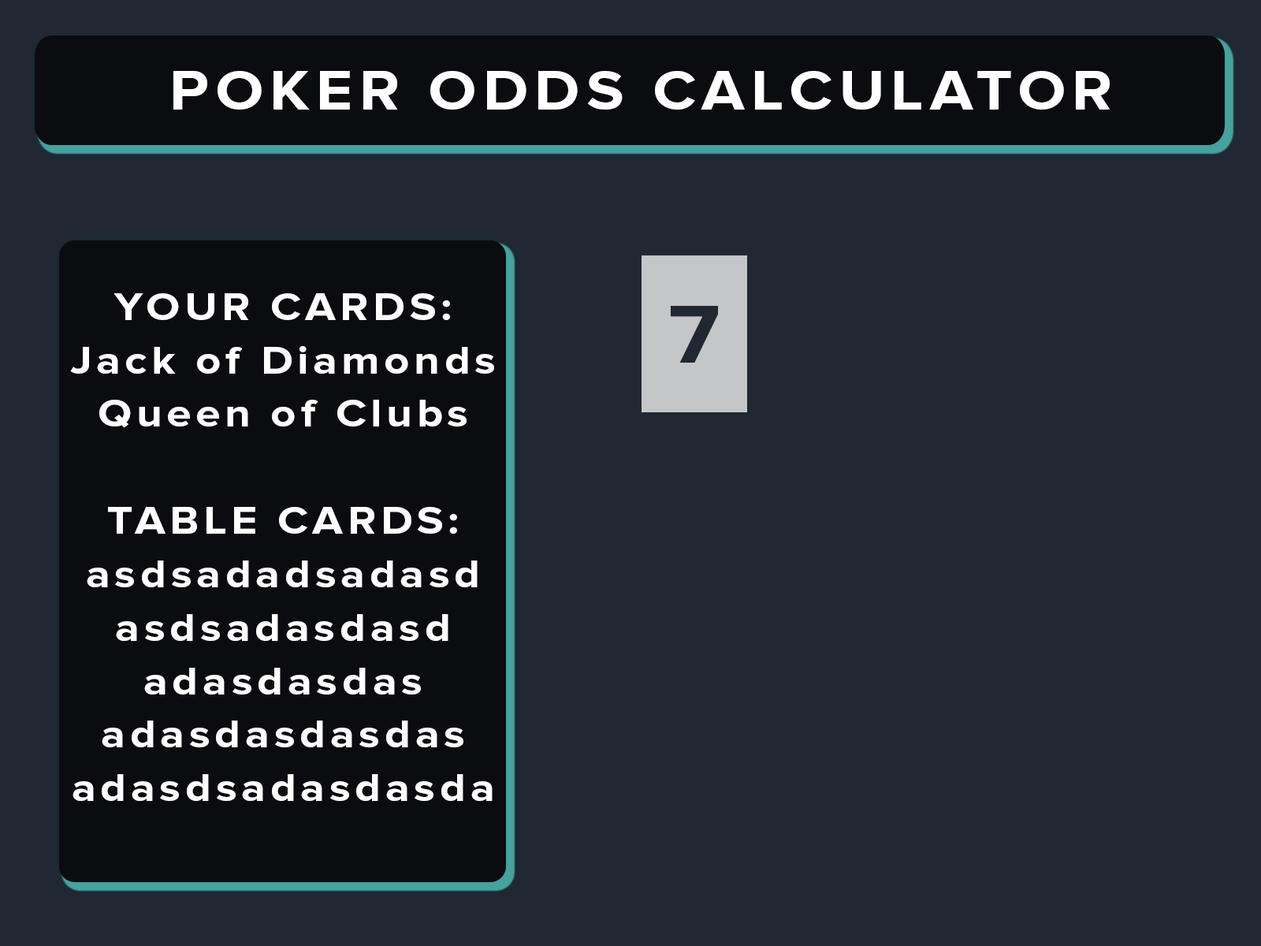
<style>
.page{position:relative;width:1261px;height:946px;background:#1f2833}
.page>*{position:absolute;margin:0}
.t1{font:56.7px "ProximaNova-Bold";letter-spacing:0.1em;color:#ffffff;scale:1.11 1}
.t2{font:40.1px "ProximaNova-Bold";letter-spacing:0.1em;color:#ffffff;scale:1.11 1}
.t3{font:85.1px "ProximaNova-Bold";letter-spacing:0.1em;color:#1f2833;scale:1.11 1}
</style>
<div class="page">
<p class="t1" style="left:173px;top:71px;width:937px;height:39px">POKER ODDS CALCULATOR</p>
<p class="t2" style="left:70px;top:293px;width:424px;height:508px;text-align:center">YOUR CARDS:<br>Jack of Diamonds<br>Queen of Clubs<br><br>TABLE CARDS:<br>asdsadadsadasd<br>asdsadasdasd<br>adasdasdas<br>adasdasdasdas<br>adasdsadasdasda</p>
<p class="t3" style="left:671px;top:306px;width:47px;height:57px">7</p>
</div>
